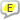
<style>
.page{position:relative;width:20px;height:20px;background:#ffffff}
.page>*{position:absolute;margin:0}
.t1{font:12.5px "Calibri";color:#5b5b5b}
</style>
<div class="page">
<p class="t1" style="left:7px;top:4px;width:6px;height:8px">E</p>
</div>
